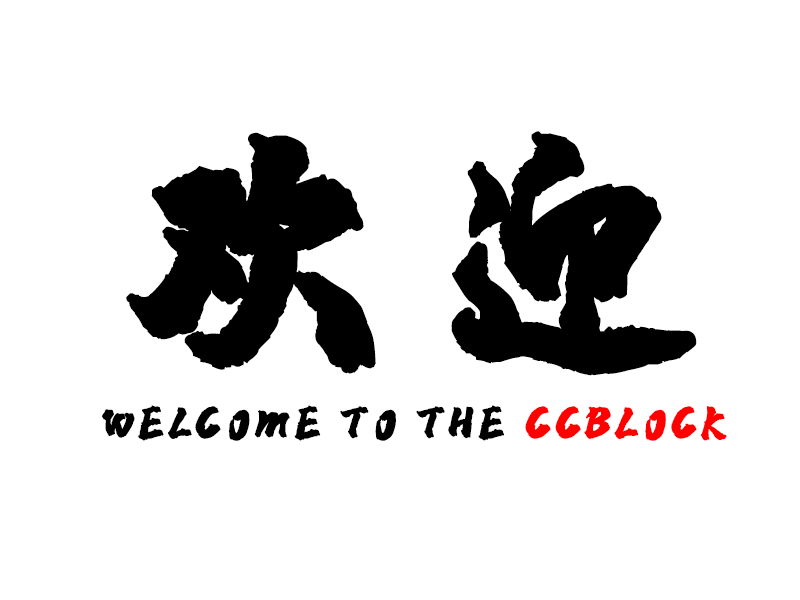
<style>
.page{position:relative;width:800px;height:600px;background:#ffffff}
.page>*{position:absolute;margin:0}
.t1{font:300.4px "zihun24hao-zhenhunshoushu";color:#000000;text-transform:uppercase;font-weight:bold}
.t2{font:50px "zihun24hao-zhenhunshoushu";color:#000000;text-transform:uppercase;font-weight:bold}
.t3{font:50px "zihun24hao-zhenhunshoushu";color:#ff0000;text-transform:uppercase;font-weight:bold}
</style>
<div class="page">
<p class="t1" style="left:126px;top:131px;width:571px;height:245px">欢迎</p>
<p class="t2" style="left:102px;top:405px;width:625px;height:36px">WELCOME TO THE <span class="t3">CCBLOCK</span></p>
</div>
